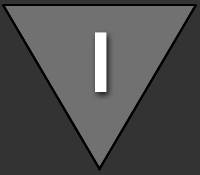
<style>
.page{position:relative;width:200px;height:175px;background:#333333}
.page>*{position:absolute;margin:0}
.t1{font:87.3px "GillSans-SemiBold";color:#ffffff;scale:1.03 1}
</style>
<div class="page">
<p class="t1" style="left:95px;top:32px;width:12px;height:60px">1</p>
</div>
